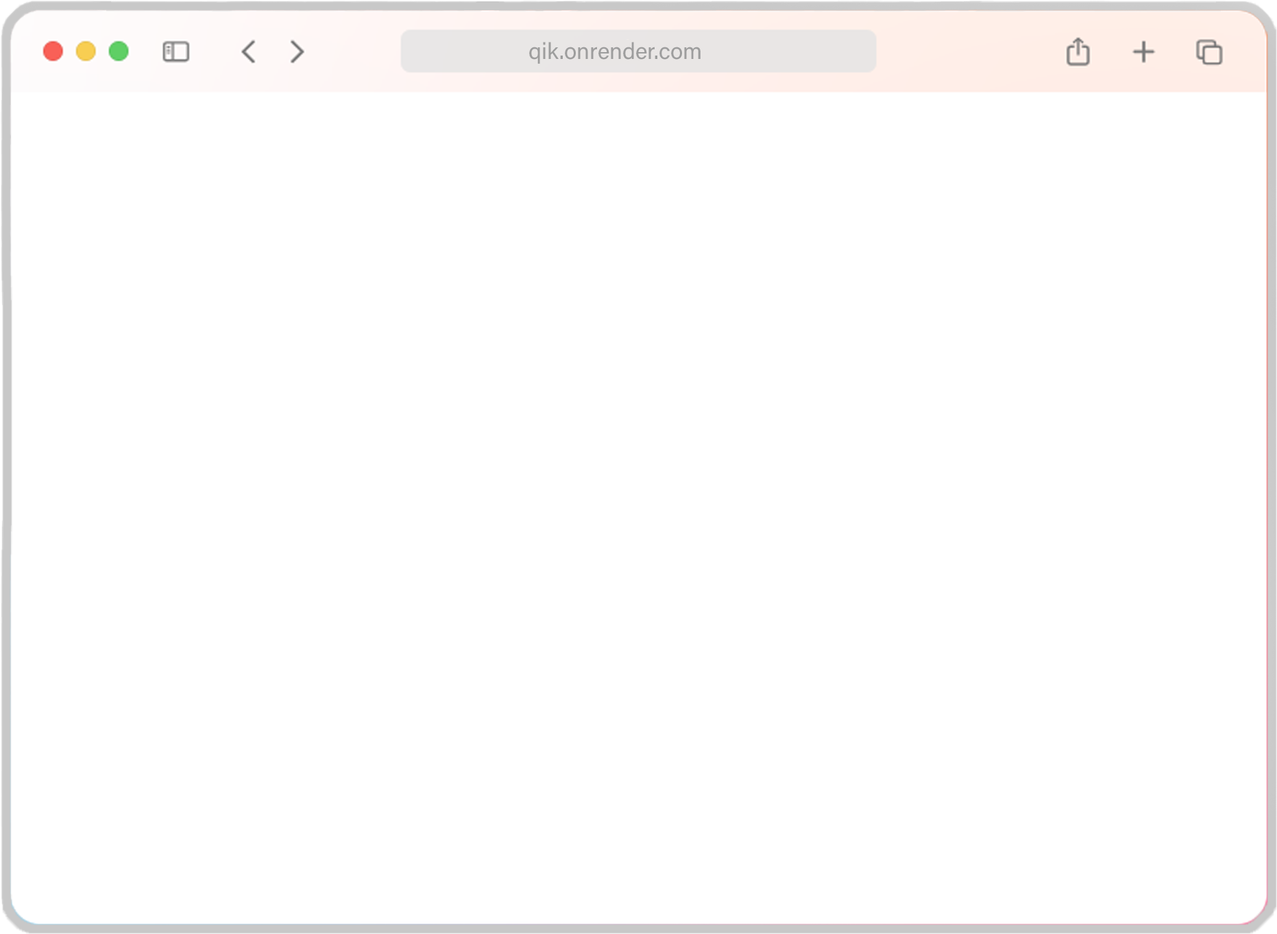
<style>
.page{position:relative;width:1277px;height:934px;background:#ffffff}
.page>*{position:absolute;margin:0}
.t1{font:22.9px "AcuminConcept-Regular";color:#9d9d9d}
</style>
<div class="page">
<p class="t1" style="left:529px;top:42px;width:172px;height:22px">qik.onrender.com</p>
</div>
